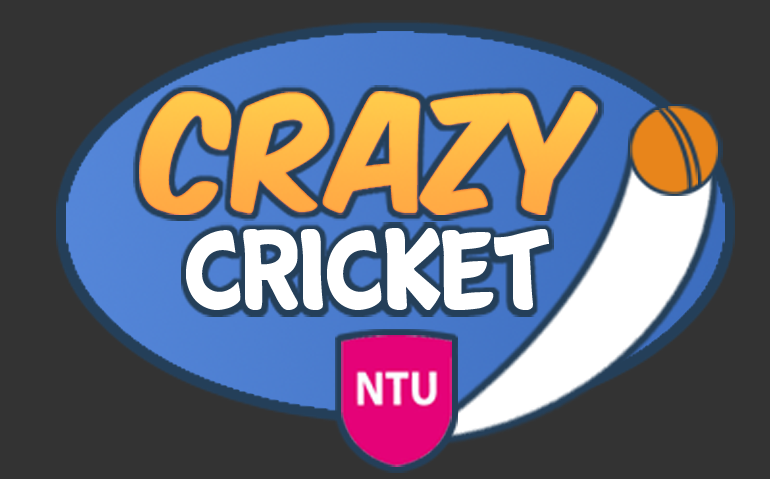
<style>
.page{position:relative;width:770px;height:479px;background:#333333}
.page>*{position:absolute;margin:0}
.t1{font:135.6px "KomikaAxis";color:#ffb947}
.t2{font:115px "Cartwheel";color:#ffffff}
</style>
<div class="page">
<p class="t1" style="left:139px;top:91px;width:458px;height:124px">CRAZY</p>
<p class="t2" style="left:186px;top:228px;width:363px;height:82px">cricket</p>
</div>
